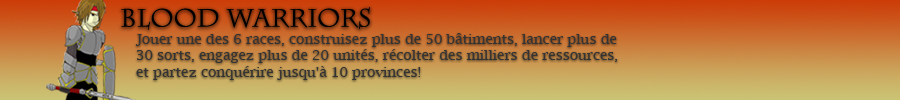
<style>
.page{position:relative;width:900px;height:100px}
.page>*{position:absolute;margin:0}
.t1{font:25px "CharlemagneStd-Regular";color:#000000}
.t2{font:13.9px "LucidaBright";color:#333333}
</style>
<div class="page">
<p class="t1" style="left:121px;top:7px;width:249px;height:23px">Blood WARRIORS</p>
<p class="t2" style="left:135px;top:33px;width:483px;height:47px">Jouer une des 6 races, construisez plus de 50 bâtiments, lancer plus de <br>30 sorts, engagez plus de 20 unités, récolter des milliers de ressources, <br>et partez conquérire jusqu'à 10 provinces!</p>
</div>
